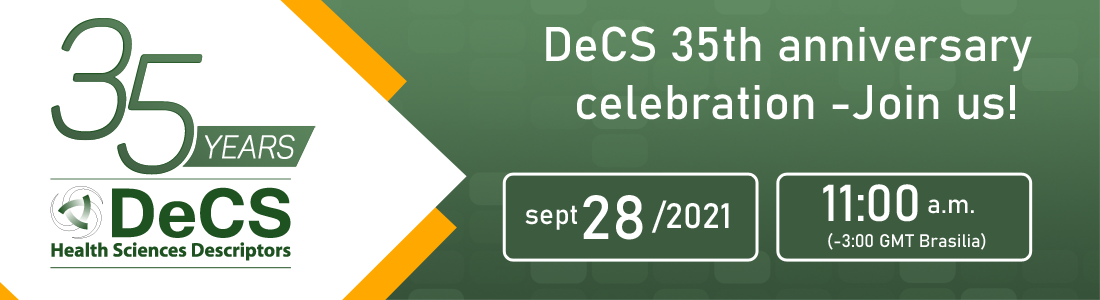
<style>
.page{position:relative;width:1100px;height:300px;background:#ffffff}
.page>*{position:absolute;margin:0}
.t1{font:163.5px "Panton-LightitalicCaps";color:#4b6f4d;font-weight:bold;scale:0.9 1}
.t2{font:48px "Bahnschrift";color:#ffffff}
.t3{font:163.5px "Panton-LightitalicCaps";color:#4d724f;font-weight:bold;scale:0.9 1}
.t4{font:32.2px "Panton-LightitalicCaps";color:#ffffff;font-weight:bold;scale:0.9 1}
.t5{font:51.1px "Bahnschrift";color:#ffffff}
.t6{font:61.3px "Bahnschrift";color:#ffffff}
.t7{font:28px "Bahnschrift";color:#ffffff}
.t8{font:34.7px "Bahnschrift";color:#ffffff}
.t9{font:26.3px "Bahnschrift";color:#ffffff}
.t10{font:18px "Bahnschrift";color:#ffffff}
</style>
<div class="page">
<p class="t1" style="left:51px;top:18px;width:81px;height:122px">3</p>
<p class="t2" style="left:546px;top:26px;width:486px;height:94px;text-align:right">DeCS 35th anniversary<br>celebration -Join us!</p>
<p class="t3" style="left:117px;top:54px;width:86px;height:121px">5</p>
<p class="t4" style="left:205px;top:134px;width:90px;height:25px">YEARS</p>
<p class="t5" style="left:823px;top:184px;width:95px;height:38px">11:00</p>
<p class="t6" style="left:583px;top:195px;width:60px;height:45px">28</p>
<p class="t7" style="left:525px;top:205px;width:52px;height:25px">sept</p>
<p class="t8" style="left:651px;top:200px;width:78px;height:33px">/2021</p>
<p class="t9" style="left:928px;top:199px;width:46px;height:15px">a.m.</p>
<p class="t10" style="left:828px;top:233px;width:158px;height:17px">(-3:00 GMT Brasilia)</p>
</div>
